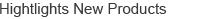
<style>
.page{position:relative;width:200px;height:19px;background:#ffffff}
.page>*{position:absolute;margin:0}
.t1{font:15px "ArialMT";color:#393939}
</style>
<div class="page">
<p class="t1" style="left:0px;top:3px;width:167px;height:14px">Hightlights New Products</p>
</div>
